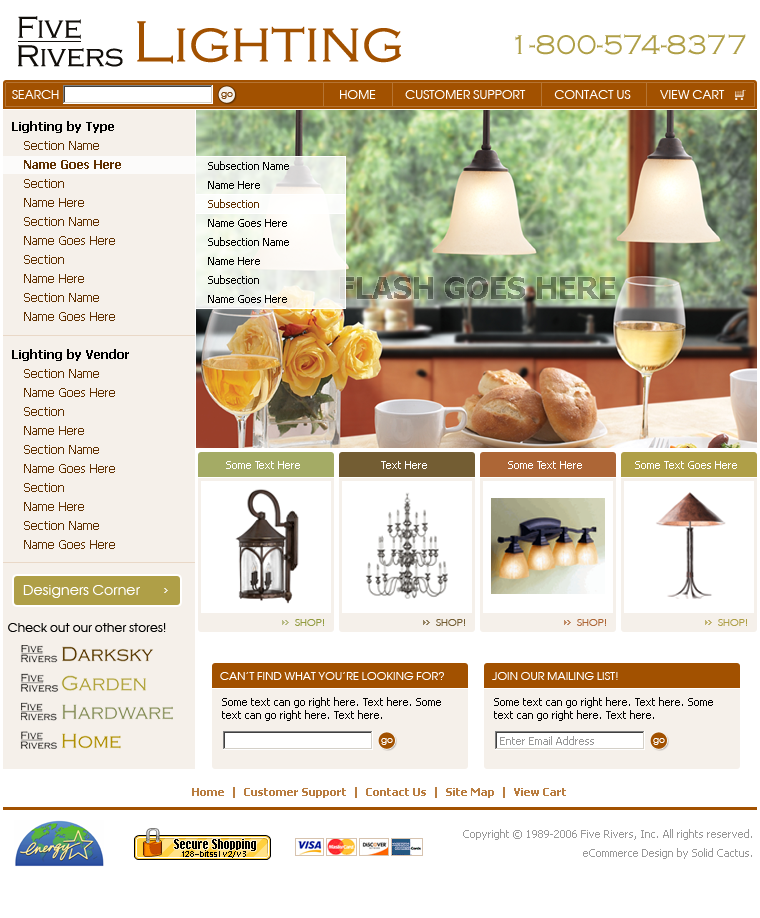
<style>
.page{position:relative;width:760px;height:918px;background:#ffffff}
.page>*{position:absolute;margin:0}
.t1{font:28px "CopperplateGothic-Light";letter-spacing:0.012em;color:#af9f47;text-transform:uppercase}
.t2{font:12px "AvantGardeCTT";letter-spacing:0.012em;color:#ffffff;text-transform:uppercase}
.t3{font:9px "AvantGardeCTT";letter-spacing:-0.02em;color:#7c4106}
.t4{font:12px/19px "Tahoma";color:#603000}
.t5{font:12px/19px "Tahoma-Bold";color:#000000}
.t6{font:12px/19px "Tahoma-Bold";color:#603000}
.t7{font:11px/19px "Tahoma";color:#000000}
.t8{font:11px/19px "Tahoma";color:#603000}
.t9{font:30px "Tahoma-Bold"}
.t10{font:11px "Tahoma";color:#ffffff}
.t11{font:14px "AvantGardeCTT";letter-spacing:0.012em;color:#ffffff}
.t12{font:12px "AvantGardeCTT";letter-spacing:0.012em;color:#010100}
.t13{font:10px "AvantGardeCTT";letter-spacing:0.012em;color:#929b3f;text-transform:uppercase}
.t14{font:10px "AvantGardeCTT";letter-spacing:0.012em;color:#735d33;text-transform:uppercase}
.t15{font:10px "AvantGardeCTT";letter-spacing:0.012em;color:#ad6636;text-transform:uppercase}
.t16{font:10px "AvantGardeCTT";letter-spacing:0.012em;color:#af9f47;text-transform:uppercase}
.t17{font:11px "AvantGardeCTT";letter-spacing:0.012em;color:#ffffff;text-transform:uppercase}
.t18{font:11px "Tahoma";color:#010000}
.t19{font:11px "Tahoma";color:#999999}
.t20{font:9px "AvantGardeCTT";letter-spacing:-0.02em;color:#ffffff}
.t21{font:11px "Tahoma-Bold";color:#b97d40}
.t22{font:11px/19px "Tahoma";color:#999999}
</style>
<div class="page">
<p class="t1" style="left:515px;top:34px;width:231px;height:21px">1-800-574-8377</p>
<p class="t2" style="left:12px;top:90px;width:47px;height:9px">search</p>
<p class="t3" style="left:221px;top:92px;width:12px;height:7px">go</p>
<p class="t2" style="left:340px;top:90px;width:385px;height:9px">Home          customer support          contact us          view cart</p>
<p class="t4" style="left:12px;top:121px;width:117px;height:428px"><span class="t5">Lighting by Type<br></span>   Section Name<br><span class="t6">   Name Goes Here<br></span>   Section<br>   Name Here<br>   Section Name<br>   Name Goes Here<br>   Section<br>   Name Here<br>   Section Name<br>   Name Goes Here<br><br><span class="t5">Lighting by Vendor<br></span>   Section Name<br>   Name Goes Here<br>   Section<br>   Name Here<br>   Section Name<br>   Name Goes Here<br>   Section<br>   Name Here<br>   Section Name<br>   Name Goes Here</p>
<p class="t7" style="left:208px;top:161px;width:81px;height:142px">Subsection Name<br>Name Here<br><span class="t8">Subsection<br></span>Name Goes Here<br>Subsection Name<br>Name Here<br>Subsection<br>Name Goes Here</p>
<p class="t9" style="left:340px;top:277px;width:275px;height:22px">FLASH GOES HERE</p>
<p class="t10" style="left:226px;top:461px;width:74px;height:8px">Some Text Here</p>
<p class="t10" style="left:381px;top:461px;width:46px;height:8px">Text Here</p>
<p class="t10" style="left:508px;top:461px;width:74px;height:8px">Some Text Here</p>
<p class="t10" style="left:635px;top:461px;width:102px;height:8px">Some Text Goes Here</p>
<p class="t11" style="left:23px;top:585px;width:117px;height:13px">Designers Corner</p>
<p class="t12" style="left:8px;top:623px;width:158px;height:9px">Check out our other stores!</p>
<p class="t13" style="left:295px;top:619px;width:29px;height:7px">shop!</p>
<p class="t14" style="left:436px;top:619px;width:29px;height:7px">shop!</p>
<p class="t15" style="left:577px;top:619px;width:29px;height:7px">shop!</p>
<p class="t16" style="left:718px;top:619px;width:29px;height:7px">shop!</p>
<p class="t17" style="left:220px;top:672px;width:224px;height:8px">Can’t find what you’re looking for?</p>
<p class="t17" style="left:492px;top:672px;width:126px;height:8px">join our mailing list!</p>
<p class="t18" style="left:222px;top:697px;width:219px;height:24px">Some text can go right here. Text here. Some text can go right here. Text here.</p>
<p class="t18" style="left:494px;top:697px;width:219px;height:24px">Some text can go right here. Text here. Some text can go right here. Text here.</p>
<p class="t19" style="left:500px;top:736px;width:94px;height:9px">Enter Email Address</p>
<p class="t20" style="left:381px;top:738px;width:12px;height:7px">go</p>
<p class="t20" style="left:653px;top:738px;width:12px;height:7px">go</p>
<p class="t21" style="left:192px;top:787px;width:374px;height:11px">Home  |  Customer Support  |  Contact Us  |  Site Map  |  View Cart</p>
<p class="t22" style="left:463px;top:829px;width:289px;height:30px;text-align:right">Copyright © 1989-2006 Five Rivers, Inc. All rights reserved.<br>eCommerce Design by Solid Cactus.</p>
</div>
